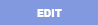
<style>
.page{position:relative;width:98px;height:25px;background:#8299df}
.page>*{position:absolute;margin:0}
.t1{font:18.2px "Arial-Black";color:#ffffff;scale:0.9 1}
</style>
<div class="page">
<p class="t1" style="left:37px;top:9px;width:25px;height:8px">EDIT</p>
</div>
